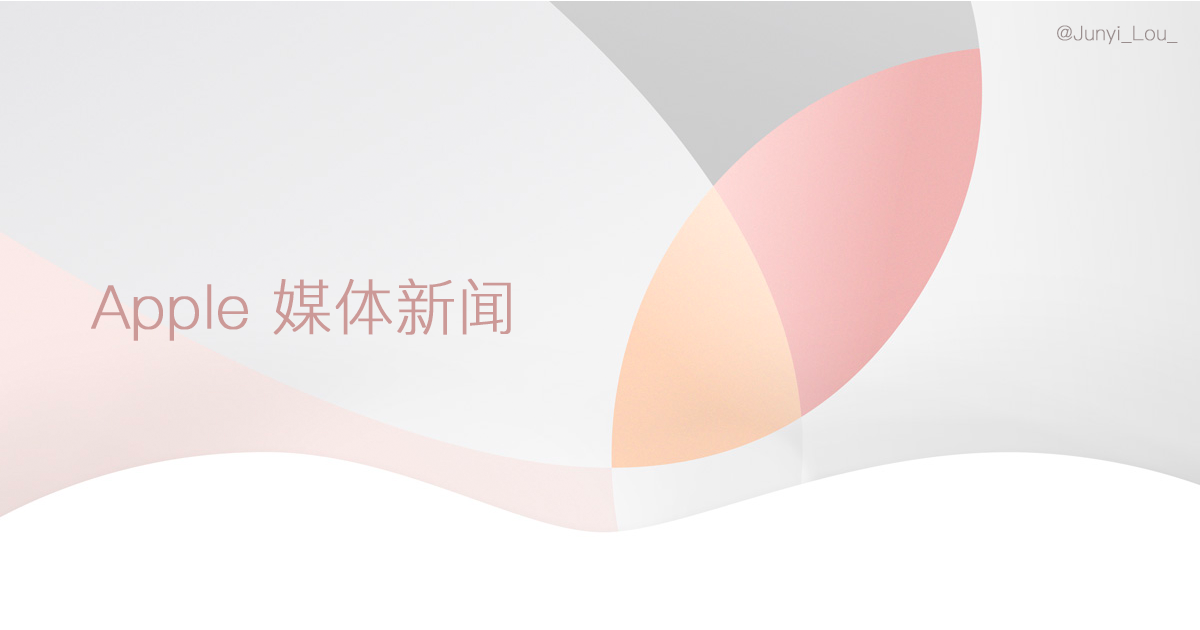
<style>
.page{position:relative;width:1200px;height:630px;background:#ffffff}
.page>*{position:absolute;margin:0}
.t1{font:20px "PingFangSC-Thin";color:#998d8d;font-weight:bold}
.t2{font:60px "PingFangSC-Thin";color:#cc9997;font-weight:bold}
</style>
<div class="page">
<p class="t1" style="left:1057px;top:25px;width:121px;height:20px">@Junyi_Lou_</p>
<p class="t2" style="left:91px;top:278px;width:420px;height:63px">Apple 媒体新闻</p>
</div>
